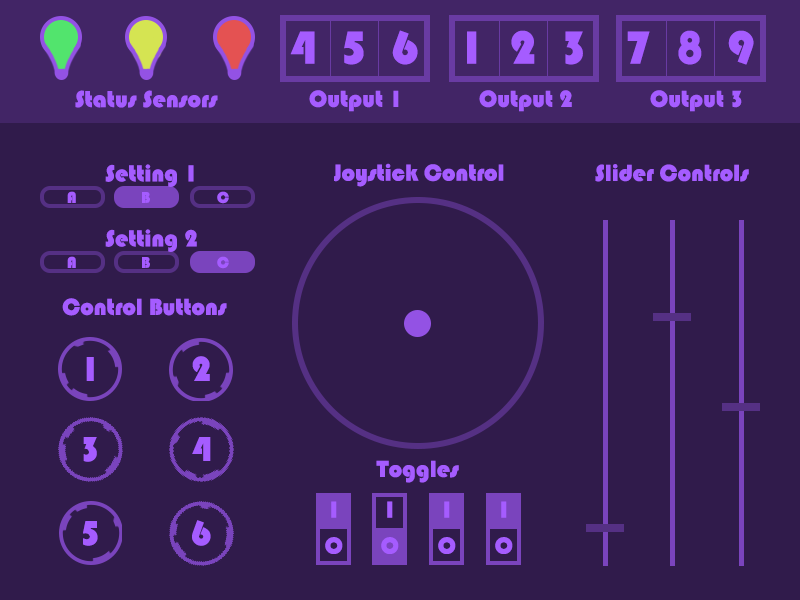
<style>
.page{position:relative;width:800px;height:600px;background:#301b4b}
.page>*{position:absolute;margin:0}
.t1{font:48px "Bauhaus93";color:#a55cff}
.t2{font:24px "Bauhaus93";color:#a55cff}
.t3{font:16px "Bauhaus93";color:#a55cff}
.t4{font:36px "Bauhaus93";color:#a55cff}
</style>
<div class="page">
<p class="t1" style="left:290px;top:30px;width:128px;height:35px">4  5  6</p>
<p class="t1" style="left:467px;top:30px;width:116px;height:35px">1  2  3</p>
<p class="t1" style="left:627px;top:30px;width:127px;height:35px">7  8  9</p>
<p class="t2" style="left:75px;top:90px;width:143px;height:18px">Status Sensors</p>
<p class="t2" style="left:309px;top:90px;width:90px;height:22px">Output 1</p>
<p class="t2" style="left:479px;top:90px;width:93px;height:22px">Output 2</p>
<p class="t2" style="left:650px;top:90px;width:92px;height:22px">Output 3</p>
<p class="t2" style="left:105px;top:164px;width:89px;height:23px">Setting 1</p>
<p class="t2" style="left:334px;top:163px;width:170px;height:24px">Joystick Control</p>
<p class="t2" style="left:595px;top:164px;width:154px;height:18px">Slider Controls</p>
<p class="t3" style="left:67px;top:191px;width:9px;height:12px">A</p>
<p class="t3" style="left:142px;top:192px;width:8px;height:11px">B</p>
<p class="t3" style="left:217px;top:191px;width:12px;height:13px">C</p>
<p class="t2" style="left:105px;top:229px;width:92px;height:23px">Setting 2</p>
<p class="t3" style="left:67px;top:256px;width:9px;height:12px">A</p>
<p class="t3" style="left:142px;top:257px;width:8px;height:11px">B</p>
<p class="t3" style="left:217px;top:256px;width:12px;height:13px">C</p>
<p class="t2" style="left:62px;top:298px;width:165px;height:18px">Control Buttons</p>
<p class="t4" style="left:86px;top:357px;width:8px;height:24px">1</p>
<p class="t4" style="left:192px;top:356px;width:18px;height:25px">2</p>
<p class="t4" style="left:83px;top:437px;width:14px;height:25px">3</p>
<p class="t4" style="left:192px;top:437px;width:19px;height:24px">4</p>
<p class="t2" style="left:376px;top:460px;width:83px;height:23px">Toggles</p>
<p class="t2" style="left:331px;top:501px;width:6px;height:17px">I</p>
<p class="t2" style="left:387px;top:501px;width:6px;height:17px">I</p>
<p class="t2" style="left:444px;top:501px;width:6px;height:17px">I</p>
<p class="t2" style="left:501px;top:501px;width:6px;height:17px">I</p>
<p class="t4" style="left:83px;top:521px;width:15px;height:25px">5</p>
<p class="t4" style="left:192px;top:520px;width:19px;height:26px">6</p>
<p class="t2" style="left:325px;top:537px;width:18px;height:17px">O</p>
<p class="t2" style="left:381px;top:537px;width:18px;height:17px">O</p>
<p class="t2" style="left:438px;top:537px;width:18px;height:17px">O</p>
<p class="t2" style="left:495px;top:537px;width:18px;height:17px">O</p>
</div>
